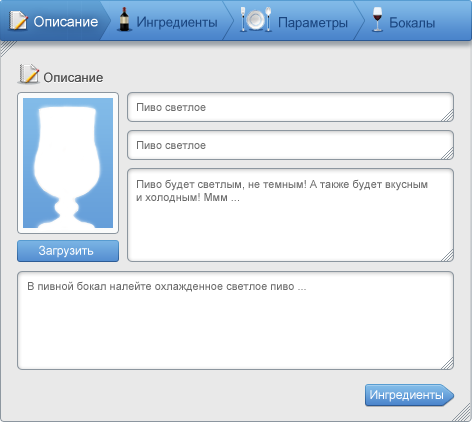
<style>
.page{position:relative;width:472px;height:422px;background:#ffffff}
.page>*{position:absolute;margin:0}
.t1{font:14px "ArialMT";color:#ffffff;font-weight:bold}
.t2{font:13px "ArialMT";color:#1b4680;font-weight:bold}
.t3{font:14px "ArialMT";color:#1b4680;font-weight:bold}
.t4{font:13px "ArialMT"}
.t5{font:13px "ArialMT";color:#505050}
.t6{font:11px "ArialMT";color:#6b6b6b}
.t7{font:12px "ArialMT";color:#ffffff;font-weight:bold}
.t8{font:12px "ArialMT";color:#ffffff}
</style>
<div class="page">
<p class="t1" style="left:34px;top:16px;width:64px;height:11px">Описание</p>
<p class="t2" style="left:137px;top:16px;width:80px;height:14px"><span class="t3">И</span>нгредиенты</p>
<p class="t2" style="left:279px;top:17px;width:69px;height:13px"><span class="t3">П</span>араметры</p>
<p class="t2" style="left:390px;top:17px;width:45px;height:11px"><span class="t3">Б</span>окалы</p>
<p class="t4" style="left:44px;top:73px;width:59px;height:11px">Описание</p>
<p class="t5" style="left:44px;top:72px;width:59px;height:11px">Описание</p>
<p class="t6" style="left:137px;top:103px;width:69px;height:8px">Пиво светлое</p>
<p class="t6" style="left:137px;top:141px;width:69px;height:8px">Пиво светлое</p>
<p class="t6" style="left:136px;top:179px;width:292px;height:24px">Пиво будет светлым, не темным! А также будет вкусным <br>и холодным! Ммм ...</p>
<p class="t7" style="left:39px;top:245px;width:55px;height:13px">Загрузить</p>
<p class="t6" style="left:28px;top:281px;width:278px;height:11px">В пивной бокал налейте охлажденное светлое пиво ...</p>
<p class="t8" style="left:370px;top:390px;width:73px;height:12px">Ингредиенты</p>
</div>
